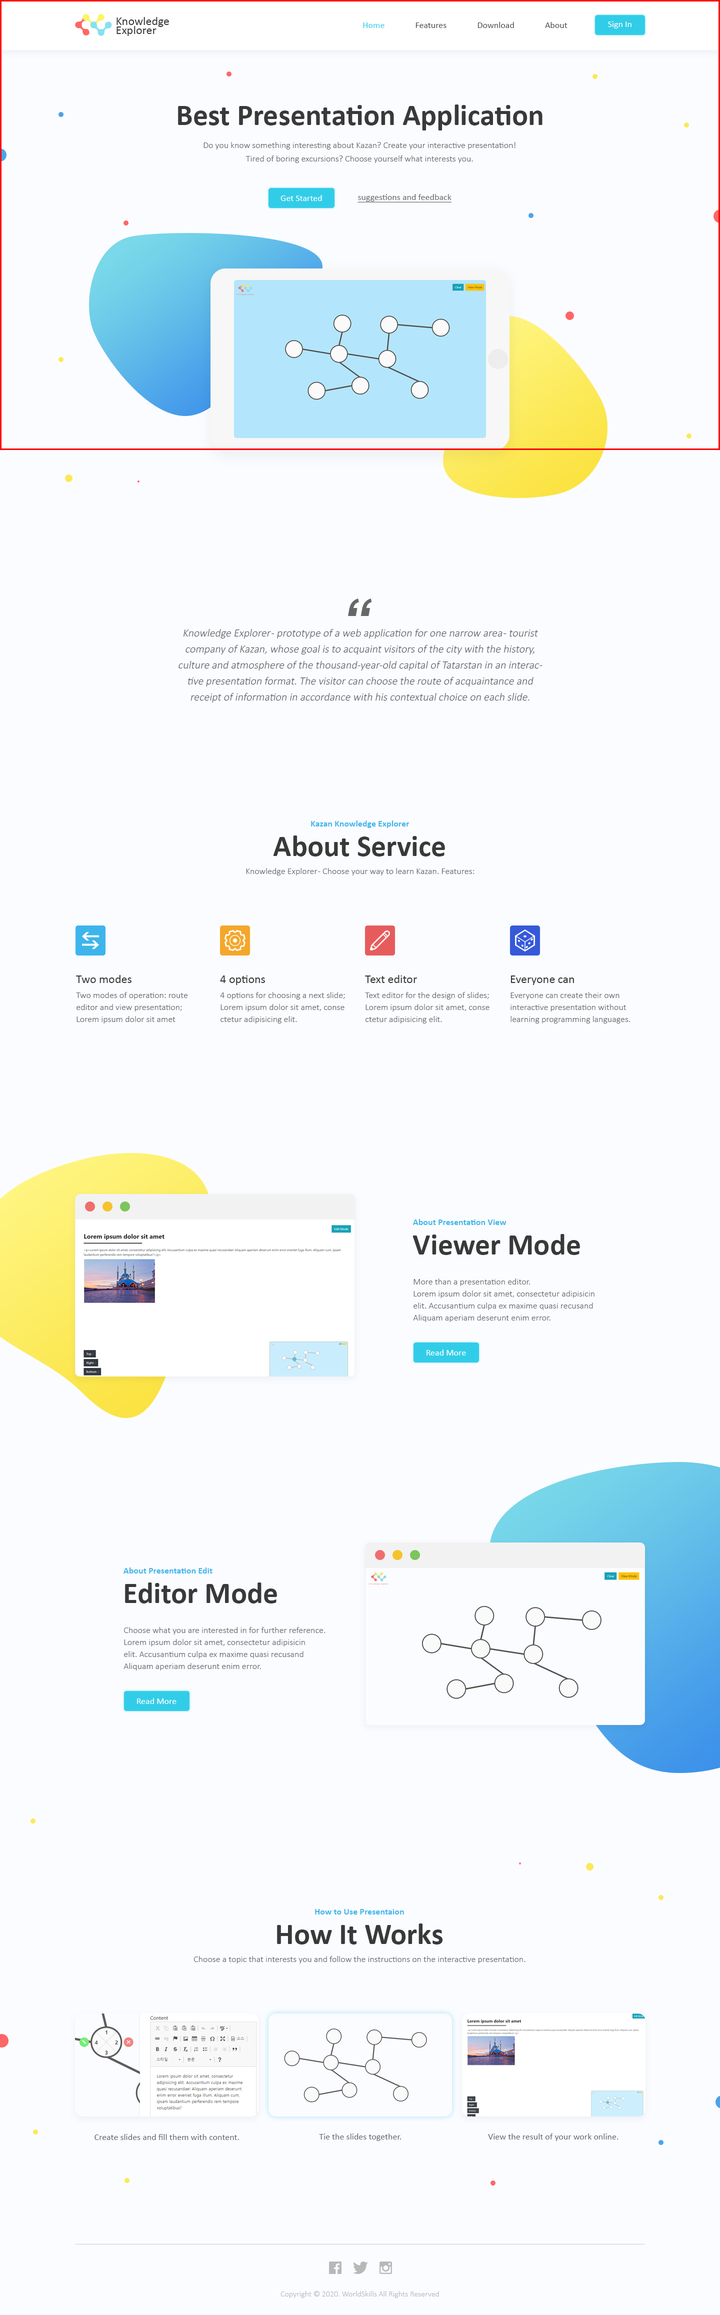
<style>
.page{position:relative;width:720px;height:2315px;background:#fbfcff}
.page>*{position:absolute;margin:0}
.t1{font:12px/9px "Calibri";color:#393939}
.t2{font:9px "Calibri";color:#4b4b4b}
.t3{font:9px "Calibri";color:#31cde8}
.t4{font:9px "Calibri";color:#ffffff}
.t5{font:30px "Calibri-Bold";color:#393939}
.t6{font:9px/13.5px "Calibri-Light";color:#676767}
.t7{font:9px "Calibri";color:#676767;text-decoration:underline}
.t8{font:11px/16px "Calibri-Light";color:#676767;font-style:italic}
.t9{font:9px "Calibri-Bold";color:#3db5eb}
.t10{font:9px "Calibri-Light";color:#676767}
.t11{font:12px "Calibri";color:#393939}
.t12{font:9px/12px "Calibri-Light";color:#676767}
.t13{font:9px "Calibri";color:#676767}
.t14{font:8px "Calibri-Light";color:#b8b8b8}
</style>
<div class="page">
<p class="t1" style="left:116px;top:17px;width:53px;height:19px">Knowledge<br>Explorer</p>
<p class="t2" style="left:363px;top:22px;width:205px;height:6px"><span class="t3">Home</span>               Features               Download               About</p>
<p class="t4" style="left:608px;top:21px;width:24px;height:7px">Sign In</p>
<p class="t5" style="left:178px;top:104px;width:364px;height:26px">Best Presentation Application</p>
<p class="t6" style="left:204px;top:142px;width:312px;height:21px;text-align:center">Do you know something interesting about Kazan? Create your interactive presentation!<br>Tired of boring excursions? Choose yourself what interests you.</p>
<p class="t4" style="left:280px;top:195px;width:42px;height:6px">Get Started</p>
<p class="t7" style="left:358px;top:194px;width:94px;height:8px">suggestions and feedback</p>
<p class="t8" style="left:178px;top:628px;width:364px;height:75px;text-align:center">Knowledge Explorer - prototype of a web application for one narrow area - tourist company of Kazan, whose goal is to acquaint visitors of the city with the history, culture and atmosphere of the thousand-year-old capital of Tatarstan in an interactive presentation format. The visitor can choose the route of acquaintance and receipt of information in accordance with his contextual choice on each slide.</p>
<p class="t9" style="left:311px;top:820px;width:99px;height:8px">Kazan Knowledge Explorer</p>
<p class="t5" style="left:273px;top:836px;width:172px;height:20px">About Service</p>
<p class="t10" style="left:246px;top:868px;width:228px;height:8px">Knowledge Explorer - Choose your way to learn Kazan. Features:</p>
<p class="t11" style="left:76px;top:975px;width:56px;height:8px">Two modes</p>
<p class="t11" style="left:220px;top:976px;width:45px;height:9px">4 options</p>
<p class="t11" style="left:365px;top:975px;width:52px;height:8px">Text editor</p>
<p class="t11" style="left:510px;top:976px;width:64px;height:9px">Everyone can</p>
<p class="t12" style="left:76px;top:992px;width:112px;height:32px">Two modes of operation: route <br>editor and view presentation; <br>Lorem ipsum dolor sit amet</p>
<p class="t12" style="left:220px;top:992px;width:125px;height:32px">4 options for choosing a next slide;<br>Lorem ipsum dolor sit amet, conse<br>ctetur adipisicing elit.</p>
<p class="t12" style="left:365px;top:992px;width:125px;height:32px">Text editor for the design of slides;<br>Lorem ipsum dolor sit amet, conse<br>ctetur adipisicing elit.</p>
<p class="t12" style="left:510px;top:992px;width:120px;height:32px">Everyone can create their own <br>interactive presentation without <br>learning programming languages.</p>
<p class="t9" style="left:413px;top:1219px;width:93px;height:6px">About Presentation View</p>
<p class="t5" style="left:412px;top:1234px;width:168px;height:21px">Viewer Mode</p>
<p class="t12" style="left:413px;top:1278px;width:181px;height:44px">More than a presentation editor.<br>Lorem ipsum dolor sit amet, consectetur adipisicin<br>elit. Accusantium culpa ex maxime quasi recusand<br>Aliquam aperiam deserunt enim error.</p>
<p class="t4" style="left:426px;top:1350px;width:40px;height:6px">Read More</p>
<p class="t9" style="left:124px;top:1568px;width:88px;height:6px">About Presentation Edit</p>
<p class="t5" style="left:125px;top:1582px;width:152px;height:22px">Editor Mode</p>
<p class="t12" style="left:124px;top:1627px;width:202px;height:43px">Choose what you are interested in for further reference.<br>Lorem ipsum dolor sit amet, consectetur adipisicin<br>elit. Accusantium culpa ex maxime quasi recusand<br>Aliquam aperiam deserunt enim error.</p>
<p class="t4" style="left:137px;top:1698px;width:39px;height:6px">Read More</p>
<p class="t9" style="left:315px;top:1909px;width:89px;height:5px">How to Use Presentaion</p>
<p class="t5" style="left:277px;top:1924px;width:166px;height:20px">How It Works</p>
<p class="t10" style="left:194px;top:1956px;width:332px;height:8px">Choose a topic that interests you and follow the instructions on the interactive presentation.</p>
<p class="t13" style="left:94px;top:2134px;width:145px;height:6px">Create slides and fill them with content.</p>
<p class="t13" style="left:319px;top:2134px;width:82px;height:7px">Tie the slides together.</p>
<p class="t13" style="left:488px;top:2134px;width:130px;height:7px">View the result of your work online.</p>
<p class="t14" style="left:280px;top:2291px;width:159px;height:7px">Copyright © 2020. WorldSkills All Rights Reserved</p>
</div>
